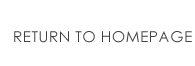
<style>
.page{position:relative;width:195px;height:66px;background:#ffffff}
.page>*{position:absolute;margin:0}
.t1{font:15px "CenturyGothic";letter-spacing:0.02em;color:#424141;scale:1.04 1}
</style>
<div class="page">
<p class="t1" style="left:14px;top:31px;width:178px;height:12px">RETURN TO HOMEPAGE</p>
</div>
